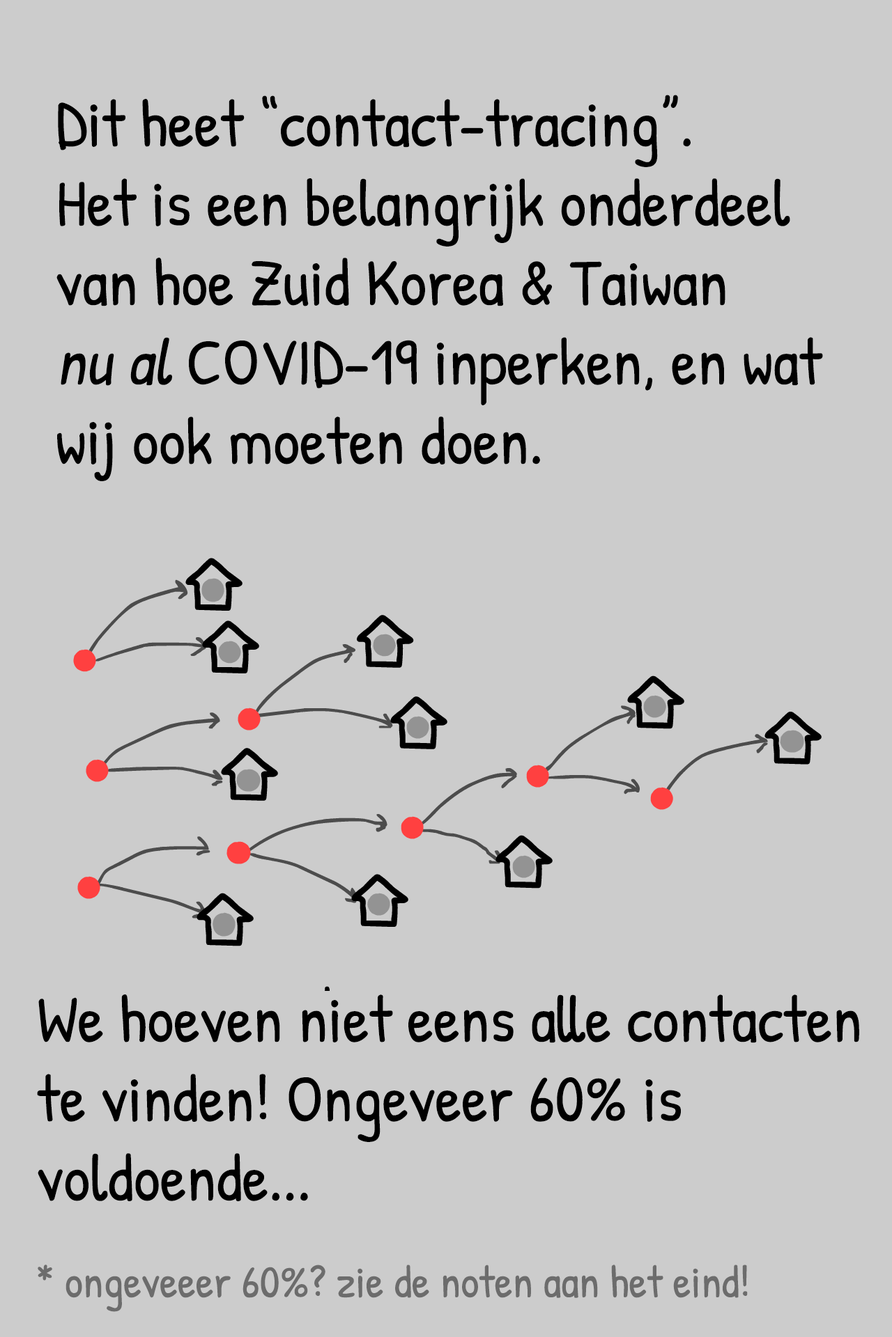
<style>
.page{position:relative;width:892px;height:1337px;background:#cccccc}
.page>*{position:absolute;margin:0}
.t1{font:66.2px "PatrickHand-Regular";color:#000000}
.t2{font:66.2px "PatrickHand-Regular";color:#000000;font-style:italic}
.t3{font:45.3px "PatrickHand-Regular";color:#6c6c6c}
</style>
<div class="page">
<p class="t1" style="left:56px;top:95px;width:767px;height:386px">Dit heet “contact-tracing”.<br>Het is een belangrijk onderdeel<br>van hoe Zuid Korea &amp; Taiwan<br><span class="t2">nu al</span> COVID-19 inperken, en wat<br>wij ook moeten doen.</p>
<p class="t1" style="left:37px;top:995px;width:822px;height:207px">We hoeven niet eens alle contacten<br>te vinden! Ongeveer 60% is<br>voldoende...</p>
<p class="t3" style="left:38px;top:1265px;width:709px;height:47px">* ongeveeer 60%? zie de noten aan het eind!</p>
</div>
